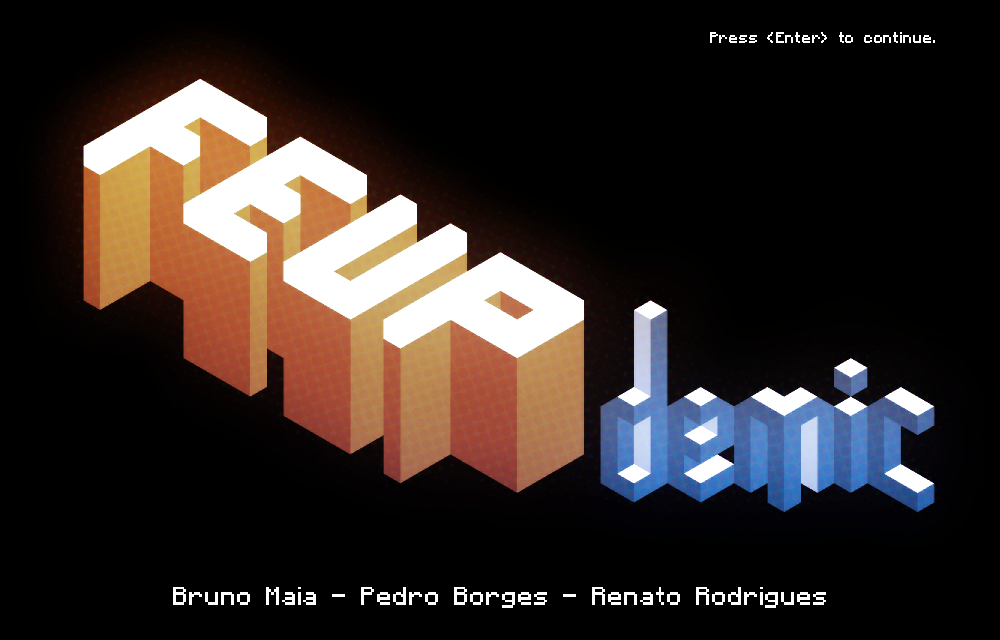
<style>
.page{position:relative;width:1000px;height:640px;background:#000000}
.page>*{position:absolute;margin:0}
.t1{font:12px "Minecraftia";letter-spacing:0.06em;color:#ffffff}
.t2{font:21.3px "Minecraftia";color:#ffffff}
</style>
<div class="page">
<p class="t1" style="left:710px;top:32px;width:225px;height:11px">Press &lt;Enter&gt; to continue.</p>
<p class="t2" style="left:173px;top:587px;width:653px;height:21px">Bruno Maia - Pedro Borges - Renato Rodrigues</p>
</div>
